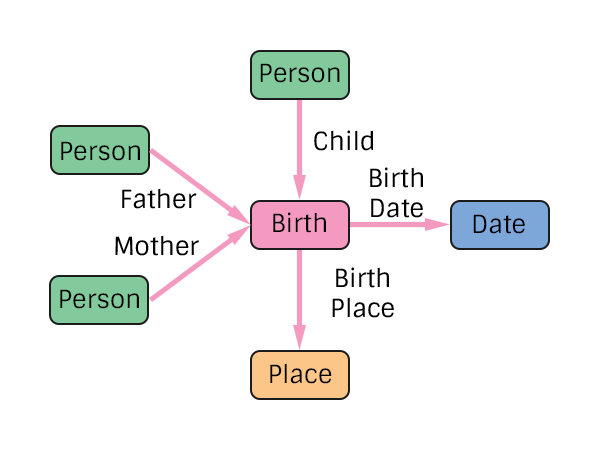
<style>
.page{position:relative;width:600px;height:450px;background:#ffffff}
.page>*{position:absolute;margin:0}
.t1{font:25px "Sintony";color:#000000}
</style>
<div class="page">
<p class="t1" style="left:260px;top:63px;width:80px;height:20px">Person</p>
<p class="t1" style="left:314px;top:130px;width:59px;height:21px">Child</p>
<p class="t1" style="left:61px;top:141px;width:79px;height:20px">Person</p>
<p class="t1" style="left:370px;top:167px;width:53px;height:51px;text-align:center">Birth<br>Date</p>
<p class="t1" style="left:122px;top:188px;width:75px;height:21px">Father</p>
<p class="t1" style="left:273px;top:212px;width:53px;height:21px">Birth</p>
<p class="t1" style="left:473px;top:214px;width:52px;height:20px">Date</p>
<p class="t1" style="left:115px;top:235px;width:84px;height:21px">Mother</p>
<p class="t1" style="left:332px;top:267px;width:62px;height:51px;text-align:center">Birth<br>Place</p>
<p class="t1" style="left:60px;top:289px;width:79px;height:20px">Person</p>
<p class="t1" style="left:270px;top:363px;width:62px;height:21px">Place</p>
</div>
